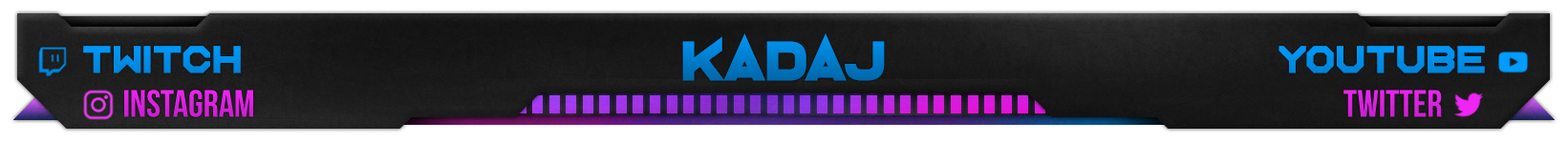
<style>
.page{position:relative;width:1568px;height:142px}
.page>*{position:absolute;margin:0}
.t1{font:57.3px "Neuterous"}
.t2{font:34.4px "NameSmile";color:#008fe9}
.t3{font:38.2px "BebasNeue-Regular";color:#db21e2}
.t4{font:38.2px "BebasNeue-Regular";color:#dd21e3}
</style>
<div class="page">
<p class="t1" style="left:682px;top:33px;width:203px;height:48px">Kadaj</p>
<p class="t2" style="left:83px;top:46px;width:158px;height:28px">TWITCH</p>
<p class="t2" style="left:1278px;top:46px;width:207px;height:28px">YOUTUBE</p>
<p class="t3" style="left:124px;top:90px;width:129px;height:28px">INSTAGRAM</p>
<p class="t4" style="left:1343px;top:90px;width:99px;height:28px">TWITTER</p>
</div>
